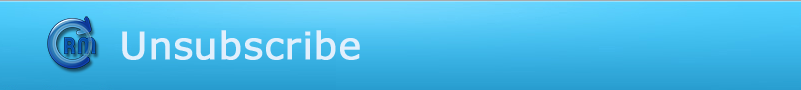
<style>
.page{position:relative;width:801px;height:90px}
.page>*{position:absolute;margin:0}
.t1{font:37.8px "Verdana";color:#e1effc;font-weight:bold}
</style>
<div class="page">
<p class="t1" style="left:122px;top:30px;width:238px;height:30px">Unsubscribe</p>
</div>
